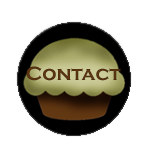
<style>
.page{position:relative;width:150px;height:150px;background:#ffffff}
.page>*{position:absolute;margin:0}
.t1{font:20px "CopperplateGothic-Bold";color:#623812}
</style>
<div class="page">
<p class="t1" style="left:26px;top:66px;width:95px;height:15px">Contact</p>
</div>
